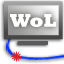
<style>
.page{position:relative;width:64px;height:64px}
.page>*{position:absolute;margin:0}
.t1{font:18.7px "Rockwell-ExtraBold";color:#ffffff}
</style>
<div class="page">
<p class="t1" style="left:10px;top:14px;width:47px;height:13px">WoL</p>
</div>
